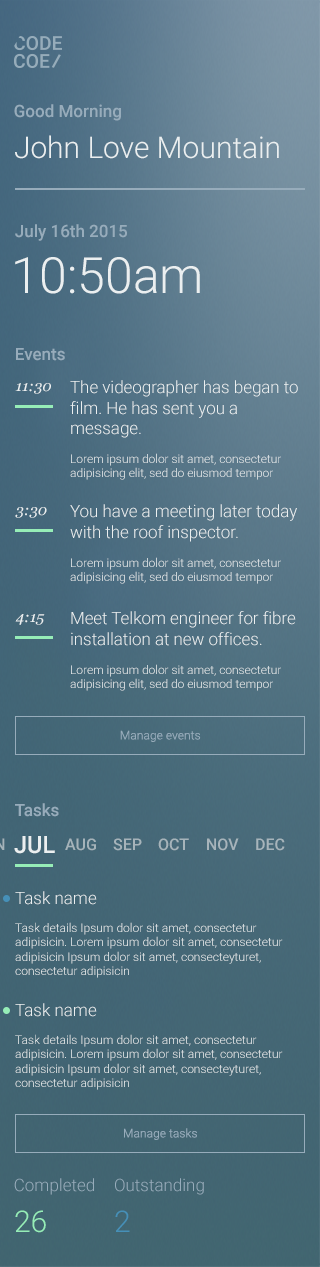
<style>
.page{position:relative;width:320px;height:1267px}
.page>*{position:absolute;margin:0}
.t1{font:17px "Roboto-Medium";color:#97acbb}
.t2{font:30px "Roboto-Light";color:#ebeff0}
.t3{font:50px "Roboto-Light";color:#ebeff0}
.t4{font:15px "Georgia-Italic";color:#ebeff0}
.t5{font:17px "Roboto-Light";color:#ebeff0}
.t6{font:12px "Roboto-Light";color:#ebeff0}
.t7{font:12px "Roboto-Light"}
.t8{font:12px "Roboto-Light";color:#97acbb}
.t9{font:24px "Roboto-Medium";color:#ebeff0}
.t10{font:16px "Roboto-Medium";color:#a5b3ba}
.t11{font:16px "Roboto-Medium";color:#a6b3ba}
.t12{font:16px "Roboto-Medium";color:#a6b4ba}
.t13{font:16px "Roboto-Medium";color:#a7b4bb}
.t14{font:16px "Roboto-Medium";color:#a7b5bb}
.t15{font:17px "Roboto-Light";color:#97acbb}
.t16{font:30px "Roboto-Light";color:#96edb7}
.t17{font:30px "Roboto-Light";color:#4690b8}
</style>
<div class="page">
<p class="t1" style="left:14px;top:104px;width:107px;height:17px">Good Morning</p>
<p class="t2" style="left:15px;top:135px;width:264px;height:24px">John Love Mountain</p>
<p class="t1" style="left:15px;top:224px;width:112px;height:17px">July 16th 2015</p>
<p class="t3" style="left:15px;top:257px;width:185px;height:37px">10:50am</p>
<p class="t1" style="left:16px;top:348px;width:49px;height:13px">Events</p>
<p class="t4" style="left:15px;top:383px;width:36px;height:11px">11:30</p>
<p class="t5" style="left:70px;top:380px;width:228px;height:58px;text-align:right">The videographer has began to film. He has sent you a message.</p>
<p class="t6" style="left:70px;top:453px;width:211px;height:27px;text-align:right">Lorem ipsum dolor sit amet, consectetur adipisicing elit, sed do eiusmod tempor  ncididunt ute.</p>
<p class="t4" style="left:15px;top:507px;width:32px;height:11px">3:30</p>
<p class="t5" style="left:70px;top:504px;width:227px;height:38px;text-align:right">You have a meeting later today with the roof inspector.</p>
<p class="t6" style="left:70px;top:557px;width:211px;height:27px;text-align:right">Lorem ipsum dolor sit amet, consectetur adipisicing elit, sed do eiusmod tempor  ncididunt ute.</p>
<p class="t4" style="left:15px;top:614px;width:30px;height:11px">4:15</p>
<p class="t5" style="left:71px;top:611px;width:225px;height:35px;text-align:right">Meet Telkom engineer for fibre installation at new offices.</p>
<p class="t7" style="left:70px;top:664px;width:211px;height:27px;text-align:right">Lorem ipsum dolor sit amet, consectetur adipisicing elit, sed do eiusmod tempor  ncididunt ute.</p>
<p class="t8" style="left:120px;top:730px;width:81px;height:12px">Manage events</p>
<p class="t1" style="left:15px;top:803px;width:44px;height:14px">Tasks</p>
<p class="t9" style="left:14px;top:836px;width:41px;height:18px">JUL</p>
<p class="t10" style="left:65px;top:838px;width:31px;height:13px">AUG</p>
<p class="t11" style="left:113px;top:838px;width:29px;height:13px">SEP</p>
<p class="t12" style="left:158px;top:838px;width:31px;height:13px">OCT</p>
<p class="t13" style="left:207px;top:838px;width:32px;height:13px">NOV</p>
<p class="t14" style="left:256px;top:838px;width:29px;height:13px">DEC</p>
<p class="t5" style="left:15px;top:891px;width:82px;height:14px">Task name</p>
<p class="t6" style="left:15px;top:922px;width:268px;height:56px;text-align:right">Task details Ipsum dolor sit amet, consectetur adipisicin. Lorem ipsum dolor sit amet, consectetur adipisicin Ipsum dolor sit amet, consecteyturet, consectetur adipisicin</p>
<p class="t5" style="left:15px;top:1003px;width:82px;height:14px">Task name</p>
<p class="t6" style="left:15px;top:1034px;width:268px;height:56px;text-align:right">Task details Ipsum dolor sit amet, consectetur adipisicin. Lorem ipsum dolor sit amet, consectetur adipisicin Ipsum dolor sit amet, consecteyturet, consectetur adipisicin</p>
<p class="t8" style="left:124px;top:1128px;width:73px;height:12px">Manage tasks</p>
<p class="t15" style="left:14px;top:1178px;width:80px;height:17px">Completed</p>
<p class="t15" style="left:115px;top:1178px;width:89px;height:17px">Outstanding</p>
<p class="t16" style="left:15px;top:1210px;width:31px;height:23px">26</p>
<p class="t17" style="left:115px;top:1210px;width:15px;height:22px">2</p>
</div>
